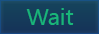
<style>
.page{position:relative;width:99px;height:34px}
.page>*{position:absolute;margin:0}
.t1{font:23.3px "SegoeUISymbol";color:#19b579}
</style>
<div class="page">
<p class="t1" style="left:26px;top:8px;width:48px;height:17px">Wait</p>
</div>
